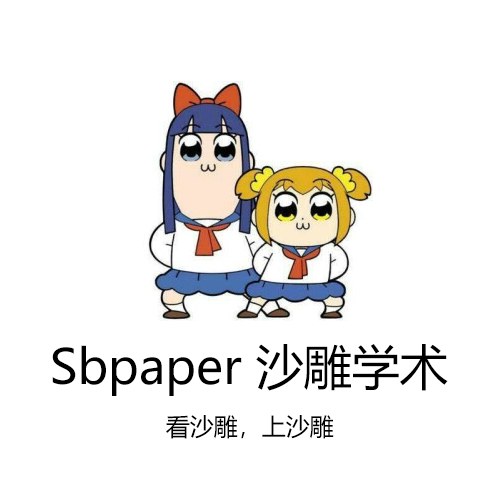
<style>
.page{position:relative;width:500px;height:500px;background:#ffffff}
.page>*{position:absolute;margin:0}
.t1{font:48px "MicrosoftYaHeiUI";color:#000000}
.t2{font:24px "MicrosoftYaHeiUI";color:#000000}
</style>
<div class="page">
<p class="t1" style="left:52px;top:344px;width:396px;height:52px">Sbpaper 沙雕学术</p>
<p class="t2" style="left:166px;top:415px;width:168px;height:24px">看沙雕，上沙雕</p>
</div>
